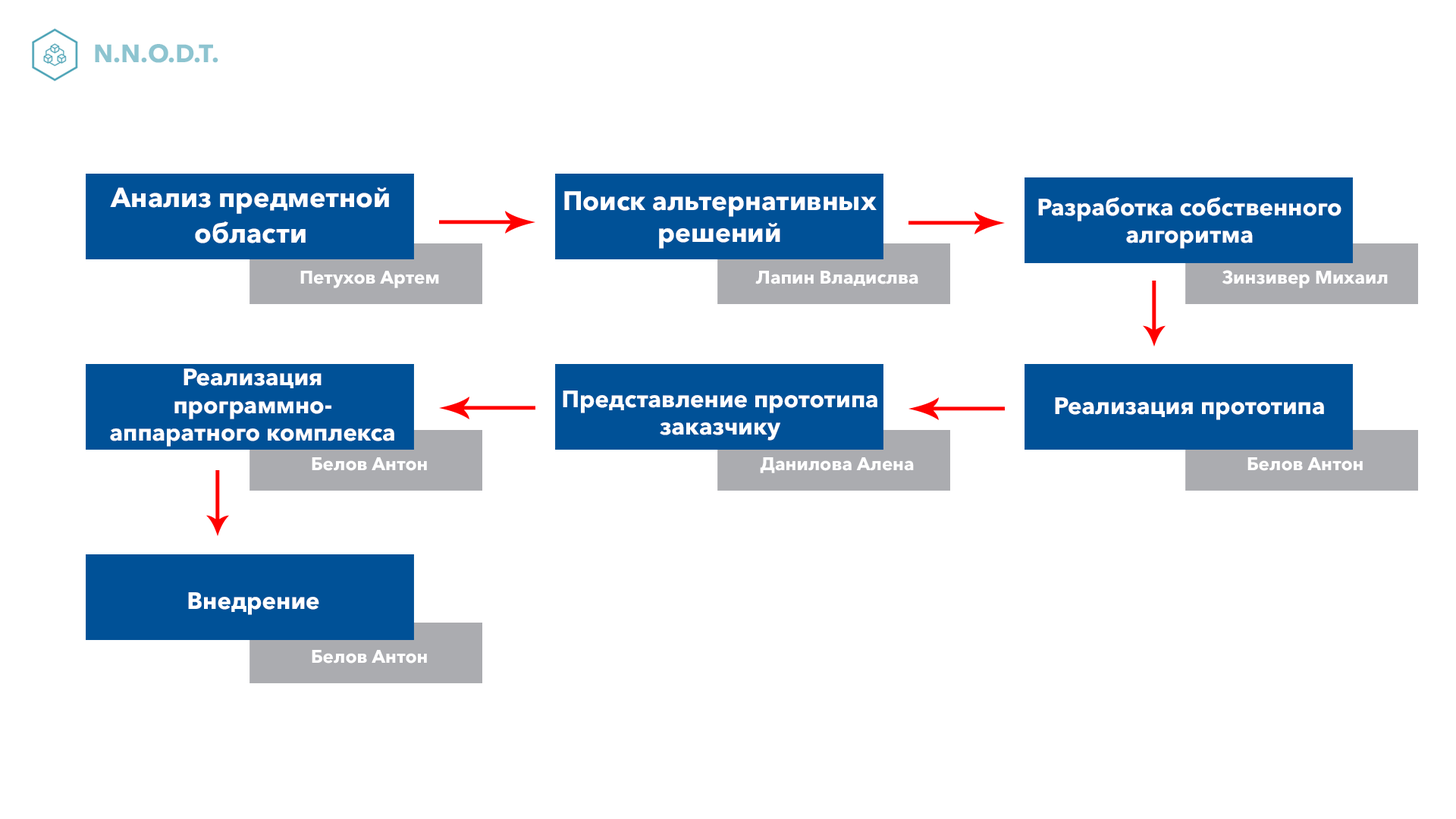
<style>
.page{position:relative;width:1456px;height:819px;background:#ffffff}
.page>*{position:absolute;margin:0}
.t1{font:25px "AvenirNextCyr-Bold";color:#8dc4d0}
.t2{font:27.3px/35.3px "AvenirNextCyr-Bold";color:#ffffff}
.t3{font:27.3px/40.6px "AvenirNextCyr-Bold";color:#ffffff}
.t4{font:26.5px/31.5px "AvenirNextCyr-Bold";color:#ffffff}
.t5{font:26.5px/34.6px "AvenirNextCyr-Bold";color:#ffffff}
.t6{font:23.5px/27px "AvenirNextCyr-Bold";color:#ffffff}
.t7{font:18.2px "AvenirNextCyr-Bold";color:#ffffff}
.t8{font:23.5px "AvenirNextCyr-Bold";color:#ffffff}
</style>
<div class="page">
<p class="t1" style="left:95px;top:44px;width:123px;height:19px">N.N.O.D.T.</p>
<p class="t2" style="left:110px;top:187px;width:279px;height:56px;text-align:center"><span class="t3">Анали</span>з предметной<br>области</p>
<p class="t4" style="left:564px;top:191px;width:313px;height:58px;text-align:center"><span class="t5">Поиск ал</span>ьтернативных<br>решений</p>
<p class="t6" style="left:1038px;top:197px;width:303px;height:52px;text-align:center">Разработка собственного<br>алгоритма</p>
<p class="t7" style="left:1222px;top:270px;width:166px;height:18px">Зинзивер Михаил</p>
<p class="t7" style="left:300px;top:271px;width:139px;height:17px">Петухов Артем</p>
<p class="t7" style="left:755px;top:271px;width:163px;height:15px">Лапин Владислва</p>
<p class="t6" style="left:110px;top:369px;width:284px;height:78px;text-align:center">Реализация<br>программно-<br>аппаратного комплекса</p>
<p class="t6" style="left:563px;top:391px;width:314px;height:50px;text-align:center">Представление прототипа<br>заказчику</p>
<p class="t8" style="left:1055px;top:397px;width:269px;height:23px">Реализация прототипа</p>
<p class="t7" style="left:312px;top:457px;width:115px;height:14px">Белов Антон</p>
<p class="t7" style="left:760px;top:457px;width:154px;height:16px">Данилова Алена</p>
<p class="t7" style="left:1247px;top:457px;width:116px;height:14px">Белов Антон</p>
<p class="t8" style="left:188px;top:592px;width:131px;height:23px">Внедрение</p>
<p class="t7" style="left:312px;top:650px;width:115px;height:14px">Белов Антон</p>
</div>
